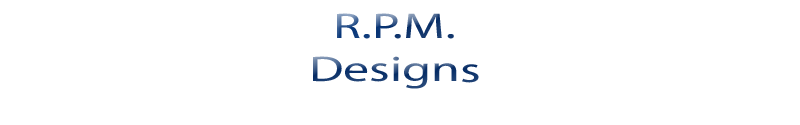
<style>
.page{position:relative;width:800px;height:125px;background:#ffffff}
.page>*{position:absolute;margin:0}
.t1{font:36px "MyriadPro-Regular";scale:1.44 1}
</style>
<div class="page">
<p class="t1" style="left:313px;top:13px;width:166px;height:76px;text-align:center">R.P.M. <br>Designs</p>
</div>
